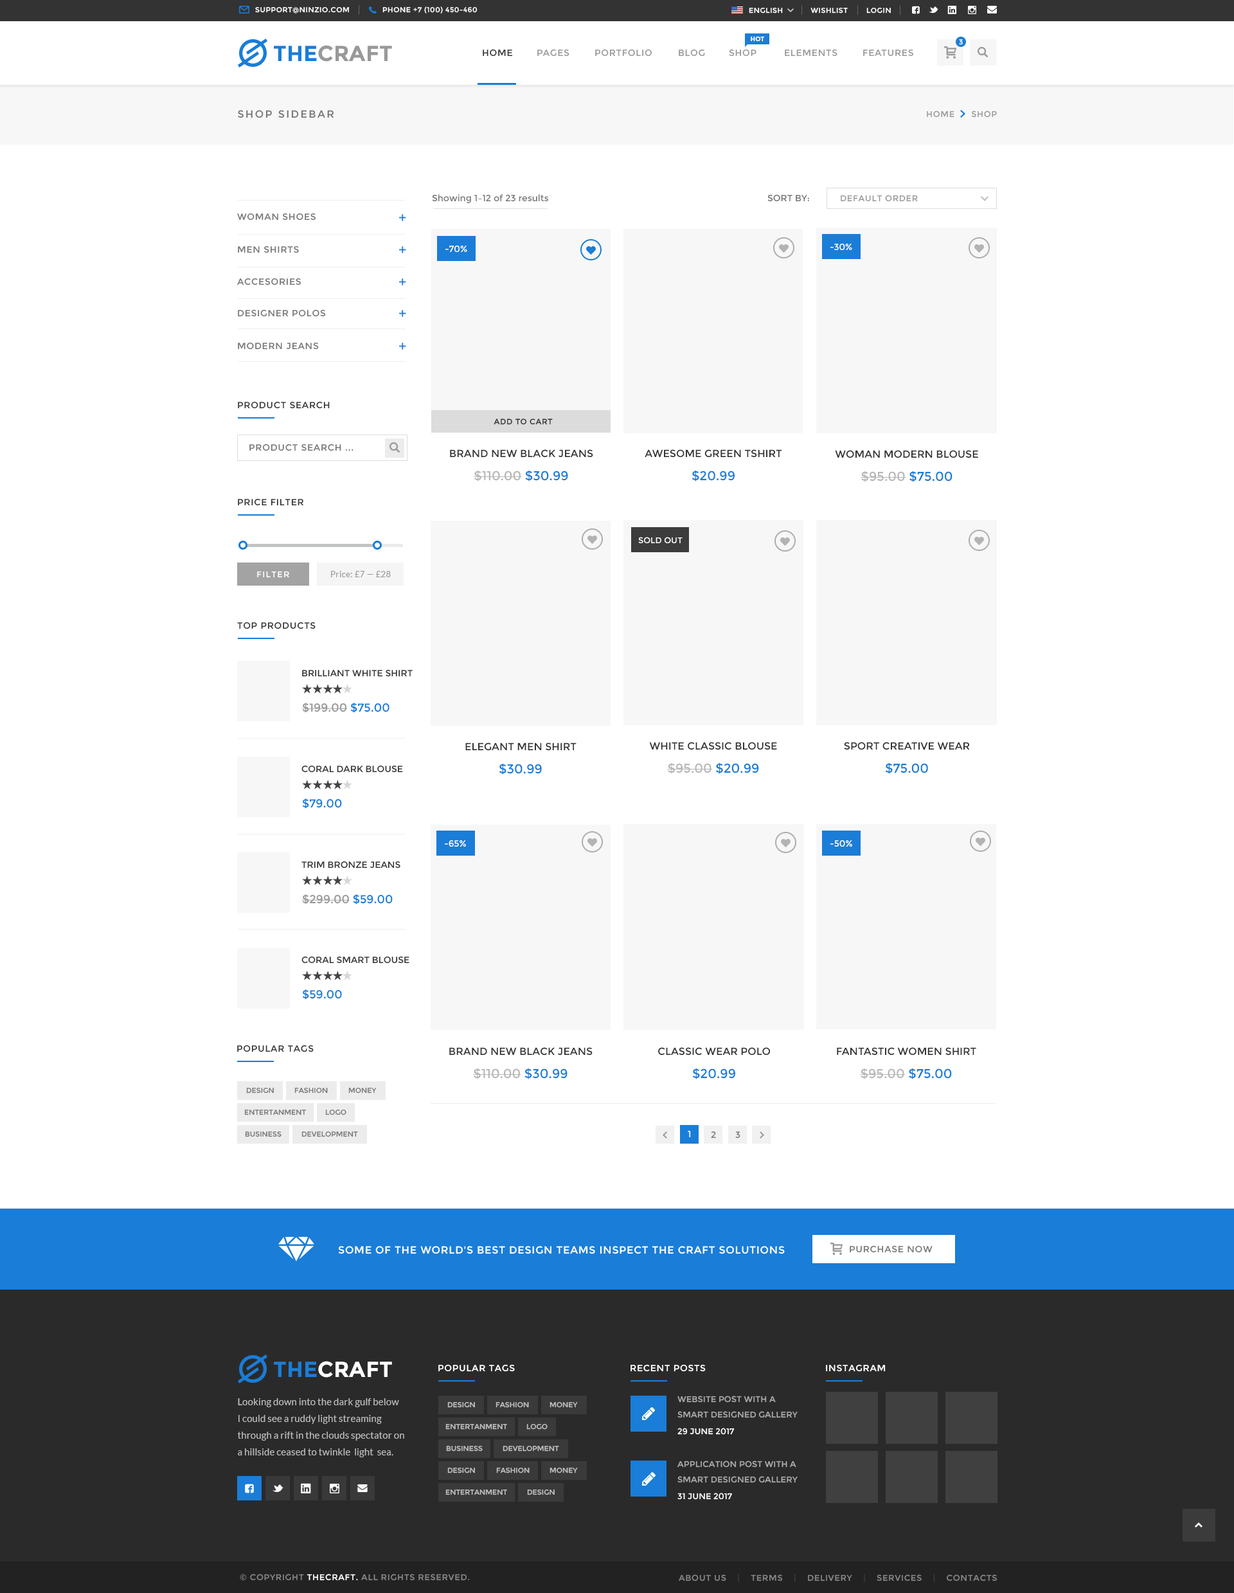
<style>
.page{position:relative;width:1234px;height:1593px;background:#ffffff}
.page>*{position:absolute;margin:0}
.t1{font:7.1px "Montserrat-Regular";letter-spacing:0.05em;color:#ffffff;text-transform:uppercase}
.t2{font:6.4px "Montserrat-Bold";color:#ffffff;text-transform:uppercase}
.t3{font:21.9px "Montserrat-Bold";color:#999999;text-transform:uppercase}
.t4{font:21.9px "Montserrat-Bold";color:#1a7dd7;text-transform:uppercase}
.t5{font:9px "Montserrat-Regular";letter-spacing:0.05em;color:#333333;text-transform:uppercase}
.t6{font:9px "Montserrat-Regular";letter-spacing:0.05em;color:#999999;text-transform:uppercase}
.t7{font:10.3px "Montserrat-Regular";letter-spacing:0.15em;color:#777777;text-transform:uppercase}
.t8{font:8.4px "Montserrat-Regular";letter-spacing:0.05em;color:#999999;text-transform:uppercase}
.t9{font:9px "Montserrat-Regular";color:#777777}
.t10{font:9px "Montserrat-Regular";color:#777777;text-transform:uppercase}
.t11{font:9px "Montserrat-Regular";letter-spacing:0.05em;color:#777777;text-transform:uppercase}
.t12{font:14.1px "Montserrat-Regular";color:#1a7dd7}
.t13{font:9px "Montserrat-Regular";color:#ffffff}
.t14{font:7.7px "Montserrat-Regular";letter-spacing:0.05em;color:#333333;text-transform:uppercase}
.t15{font:10.3px "Montserrat-Regular";color:#333333;text-transform:uppercase}
.t16{font:12.9px "Montserrat-Regular";color:#b7b7b7}
.t17{font:12.9px "Montserrat-Regular";color:#1a7dd7}
.t18{font:8.4px "Montserrat-Regular";color:#ffffff;text-transform:uppercase}
.t19{font:8.4px "Montserrat-Regular";letter-spacing:0.1em;color:#ffffff;text-transform:uppercase}
.t20{font:8.4px "Lato-Regular";letter-spacing:0.03em;color:#999999}
.t21{font:9px "Montserrat-Regular";color:#333333;text-transform:uppercase}
.t22{font:11.6px "Montserrat-Regular";color:#999999;text-transform:uppercase}
.t23{font:11.6px "Montserrat-Regular";color:#1a7dd7;text-transform:uppercase}
.t24{font:7.1px "Montserrat-Regular";color:#777777;text-transform:uppercase}
.t25{font:9px "Montserrat-Regular";letter-spacing:0.05em;color:#ffffff;text-transform:uppercase}
.t26{font:10.3px "Montserrat-Regular";letter-spacing:0.05em;color:#ffffff;text-transform:uppercase}
.t27{font:21.9px "Montserrat-Bold";color:#ffffff;text-transform:uppercase}
.t28{font:8.4px/15.4px "Montserrat-Regular";color:#ababab;text-transform:uppercase}
.t29{font:9.6px/16.7px "Lato-Regular";color:#bdbdbd}
.t30{font:7.1px "Montserrat-Regular";color:#c0c0c0;text-transform:uppercase}
.t31{font:7.1px "Montserrat-Regular";color:#c1c1c1;text-transform:uppercase}
.t32{font:8.4px "Montserrat-Regular";letter-spacing:0.05em;color:#878787;text-transform:uppercase}
.t33{font:8.4px "Montserrat-Regular";letter-spacing:0.05em;color:#ffffff;text-transform:uppercase}
.t34{font:8.4px "Montserrat-Regular";letter-spacing:0.05em;color:#404040;text-transform:uppercase}
.t35{font:8.4px "Montserrat-Regular";letter-spacing:0.05em;color:#414141;text-transform:uppercase}
</style>
<div class="page">
<p class="t1" style="left:255px;top:7px;width:94px;height:7px">support@ninzio.com</p>
<p class="t1" style="left:382px;top:6px;width:96px;height:8px">phone +7 (100) 450-460</p>
<p class="t1" style="left:749px;top:8px;width:142px;height:6px">English            Wishlist        Login</p>
<p class="t2" style="left:751px;top:36px;width:14px;height:6px">Hot</p>
<p class="t1" style="left:959px;top:39px;width:4px;height:6px">3</p>
<p class="t3" style="left:274px;top:45px;width:118px;height:17px"><span class="t4">The</span>Craft</p>
<p class="t5" style="left:483px;top:49px;width:30px;height:8px">Home</p>
<p class="t6" style="left:537px;top:49px;width:33px;height:8px">Pages</p>
<p class="t6" style="left:595px;top:49px;width:57px;height:8px">Portfolio</p>
<p class="t6" style="left:679px;top:49px;width:26px;height:8px">Blog</p>
<p class="t6" style="left:729px;top:49px;width:28px;height:8px">Shop</p>
<p class="t6" style="left:785px;top:49px;width:53px;height:8px">Elements</p>
<p class="t6" style="left:863px;top:49px;width:51px;height:8px">Features</p>
<p class="t7" style="left:238px;top:110px;width:96px;height:8px">Shop Sidebar</p>
<p class="t8" style="left:927px;top:111px;width:70px;height:7px">Home      Shop</p>
<p class="t9" style="left:432px;top:194px;width:116px;height:10px">Showing 1–12 of 23 results</p>
<p class="t10" style="left:768px;top:194px;width:41px;height:8px">Sort by:</p>
<p class="t8" style="left:841px;top:195px;width:77px;height:7px">Default Order</p>
<p class="t11" style="left:237px;top:213px;width:79px;height:8px">Woman Shoes</p>
<p class="t12" style="left:399px;top:214px;width:7px;height:7px">+</p>
<p class="t11" style="left:238px;top:246px;width:61px;height:7px">Men Shirts</p>
<p class="t13" style="left:446px;top:246px;width:21px;height:6px">-70%</p>
<p class="t13" style="left:831px;top:244px;width:21px;height:7px">-30%</p>
<p class="t12" style="left:399px;top:246px;width:7px;height:7px">+</p>
<p class="t11" style="left:237px;top:278px;width:64px;height:7px">Accesories</p>
<p class="t12" style="left:399px;top:278px;width:7px;height:7px">+</p>
<p class="t11" style="left:238px;top:309px;width:88px;height:8px">Designer Polos</p>
<p class="t12" style="left:399px;top:310px;width:7px;height:7px">+</p>
<p class="t11" style="left:238px;top:342px;width:81px;height:8px">Modern Jeans</p>
<p class="t12" style="left:399px;top:343px;width:7px;height:7px">+</p>
<p class="t5" style="left:238px;top:401px;width:92px;height:8px">Product Search</p>
<p class="t14" style="left:494px;top:419px;width:59px;height:6px">Add to Cart</p>
<p class="t11" style="left:249px;top:444px;width:105px;height:7px">Product Search ...</p>
<p class="t15" style="left:450px;top:449px;width:143px;height:9px">Brand New Black Jeans</p>
<p class="t15" style="left:645px;top:449px;width:137px;height:9px">Awesome Green Tshirt</p>
<p class="t15" style="left:835px;top:450px;width:143px;height:8px">Woman modern Blouse</p>
<p class="t16" style="left:474px;top:470px;width:94px;height:12px">$110.00 <span class="t17">$30.99</span></p>
<p class="t17" style="left:692px;top:470px;width:43px;height:12px">$20.99</p>
<p class="t16" style="left:861px;top:471px;width:92px;height:11px">$95.00 <span class="t17">$75.00</span></p>
<p class="t5" style="left:238px;top:498px;width:65px;height:8px">Price Filter</p>
<p class="t18" style="left:638px;top:537px;width:45px;height:6px">Sold Out</p>
<p class="t19" style="left:257px;top:571px;width:32px;height:7px">Filter</p>
<p class="t20" style="left:331px;top:571px;width:60px;height:6px">Price: £7 — £28</p>
<p class="t5" style="left:237px;top:622px;width:79px;height:7px">Top Products</p>
<p class="t21" style="left:302px;top:669px;width:111px;height:8px">Brilliant White Shirt</p>
<p class="t22" style="left:302px;top:703px;width:88px;height:10px">$199.00 <span class="t23">$75.00</span></p>
<p class="t15" style="left:465px;top:742px;width:112px;height:9px">Elegant Men Shirt</p>
<p class="t15" style="left:649px;top:742px;width:128px;height:8px">White Classic Blouse</p>
<p class="t15" style="left:844px;top:742px;width:126px;height:8px">Sport Creative Wear</p>
<p class="t21" style="left:302px;top:765px;width:101px;height:8px">Coral Dark Blouse</p>
<p class="t17" style="left:499px;top:763px;width:43px;height:12px">$30.99</p>
<p class="t16" style="left:667px;top:762px;width:92px;height:12px">$95.00 <span class="t17">$20.99</span></p>
<p class="t17" style="left:885px;top:762px;width:43px;height:12px">$75.00</p>
<p class="t23" style="left:302px;top:798px;width:40px;height:11px">$79.00</p>
<p class="t13" style="left:445px;top:840px;width:21px;height:7px">-65%</p>
<p class="t13" style="left:831px;top:840px;width:21px;height:7px">-50%</p>
<p class="t21" style="left:302px;top:861px;width:99px;height:8px">Trim Bronze Jeans</p>
<p class="t22" style="left:302px;top:894px;width:91px;height:11px">$299.00 <span class="t23">$59.00</span></p>
<p class="t21" style="left:302px;top:956px;width:108px;height:8px">Coral Smart Blouse</p>
<p class="t23" style="left:302px;top:989px;width:40px;height:11px">$59.00</p>
<p class="t5" style="left:237px;top:1045px;width:77px;height:7px">Popular Tags</p>
<p class="t15" style="left:449px;top:1047px;width:144px;height:9px">Brand New Black Jeans</p>
<p class="t15" style="left:658px;top:1047px;width:112px;height:9px">Classic Wear Polo</p>
<p class="t15" style="left:837px;top:1047px;width:140px;height:9px">Fantastic Women Shirt</p>
<p class="t16" style="left:473px;top:1068px;width:95px;height:11px">$110.00 <span class="t17">$30.99</span></p>
<p class="t17" style="left:692px;top:1068px;width:43px;height:11px">$20.99</p>
<p class="t16" style="left:860px;top:1068px;width:92px;height:11px">$95.00 <span class="t17">$75.00</span></p>
<p class="t24" style="left:246px;top:1088px;width:28px;height:6px">Design</p>
<p class="t24" style="left:294px;top:1088px;width:34px;height:6px">Fashion</p>
<p class="t24" style="left:348px;top:1088px;width:29px;height:6px">Money</p>
<p class="t24" style="left:244px;top:1110px;width:62px;height:5px">Entertanment</p>
<p class="t24" style="left:325px;top:1110px;width:21px;height:5px">Logo</p>
<p class="t24" style="left:245px;top:1131px;width:37px;height:6px">Business</p>
<p class="t24" style="left:302px;top:1131px;width:56px;height:6px">Development</p>
<p class="t25" style="left:688px;top:1131px;width:3px;height:7px">1</p>
<p class="t25" style="left:688px;top:1131px;width:3px;height:7px">1</p>
<p class="t11" style="left:711px;top:1131px;width:5px;height:7px">2</p>
<p class="t11" style="left:735px;top:1131px;width:6px;height:7px">3</p>
<p class="t26" style="left:338px;top:1246px;width:447px;height:8px">Some of the world's best design teams inspect The Craft solutions</p>
<p class="t11" style="left:850px;top:1245px;width:83px;height:8px">Purchase now</p>
<p class="t27" style="left:274px;top:1361px;width:118px;height:17px"><span class="t4">The</span>Craft</p>
<p class="t25" style="left:438px;top:1364px;width:77px;height:8px">Popular tags</p>
<p class="t25" style="left:631px;top:1364px;width:75px;height:8px">Recent Posts</p>
<p class="t25" style="left:826px;top:1364px;width:60px;height:8px">Instagram</p>
<p class="t28" style="left:678px;top:1396px;width:120px;height:22px">Website Post with A Smart Designed Gallery Post</p>
<p class="t29" style="left:237px;top:1398px;width:167px;height:59px">Looking down into the dark gulf below I could see a ruddy light streaming through a rift in the clouds spectator on a hillside ceased to twinkle  light  sea.</p>
<p class="t30" style="left:447px;top:1402px;width:28px;height:6px">Design</p>
<p class="t30" style="left:496px;top:1402px;width:33px;height:6px">Fashion</p>
<p class="t30" style="left:550px;top:1402px;width:28px;height:6px">Money</p>
<p class="t30" style="left:446px;top:1424px;width:61px;height:6px">Entertanment</p>
<p class="t30" style="left:526px;top:1424px;width:22px;height:6px">Logo</p>
<p class="t18" style="left:678px;top:1428px;width:57px;height:7px">29 June 2017</p>
<p class="t31" style="left:446px;top:1446px;width:37px;height:6px">Business</p>
<p class="t30" style="left:503px;top:1446px;width:56px;height:6px">Development</p>
<p class="t30" style="left:447px;top:1468px;width:28px;height:5px">Design</p>
<p class="t30" style="left:496px;top:1468px;width:34px;height:5px">Fashion</p>
<p class="t30" style="left:550px;top:1468px;width:28px;height:5px">Money</p>
<p class="t28" style="left:678px;top:1461px;width:120px;height:22px">Application Post with A Smart Designed Gallery Post</p>
<p class="t30" style="left:446px;top:1490px;width:61px;height:5px">Entertanment</p>
<p class="t30" style="left:527px;top:1490px;width:28px;height:5px">Design</p>
<p class="t18" style="left:678px;top:1493px;width:54px;height:7px">31 June 2017</p>
<p class="t32" style="left:240px;top:1574px;width:229px;height:7px">© Copyright <span class="t33">TheCraft. </span>All rights reserved.</p>
<p class="t32" style="left:679px;top:1574px;width:318px;height:9px">About Us   <span class="t34"> |</span>    Terms    <span class="t35">|</span>    Delivery    <span class="t35">|</span>    Services    <span class="t35">|</span>    Contacts</p>
</div>
